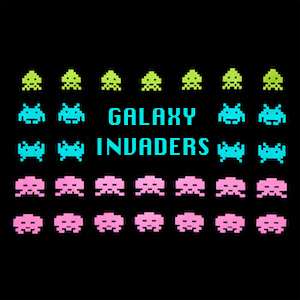
<style>
.page{position:relative;width:300px;height:300px;background:#000000}
.page>*{position:absolute;margin:0}
.t1{font:23px/10px "Krungthep";color:#00e9e7}
</style>
<div class="page">
<p class="t1" style="left:97px;top:108px;width:112px;height:47px;text-align:center">GALAXY<br><br><br>INVADERS</p>
</div>
